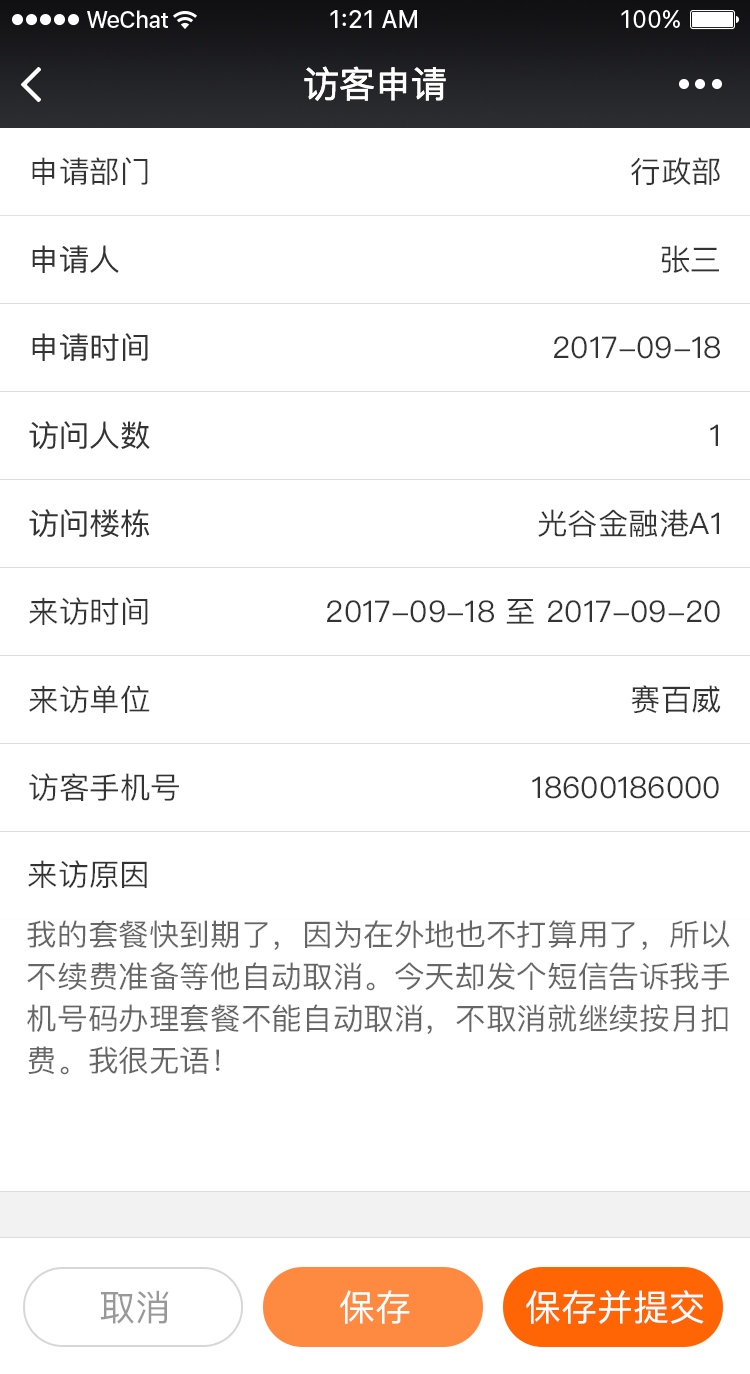
<style>
.page{position:relative;width:750px;height:1374px;background:#ffffff}
.page>*{position:absolute;margin:0}
.t1{font:36px "PingFangSC-Regular";color:#ffffff}
.t2{font:30px "PingFangSC-Regular";color:#333333}
.t3{font:30px "PingFang-SC-Medium";color:#333333}
.t4{font:30px/42px "PingFangSC-Regular";color:#666666}
.t5{font:36px "PingFangSC-Regular";color:#999999}
</style>
<div class="page">
<p class="t1" style="left:304px;top:66px;width:142px;height:35px">访客申请</p>
<p class="t2" style="left:32px;top:157px;width:116px;height:28px">申请部门</p>
<p class="t2" style="left:631px;top:157px;width:89px;height:28px">行政部</p>
<p class="t3" style="left:32px;top:245px;width:87px;height:28px">申请人</p>
<p class="t2" style="left:661px;top:245px;width:58px;height:28px">张三</p>
<p class="t3" style="left:32px;top:333px;width:116px;height:28px">申请时间</p>
<p class="t2" style="left:554px;top:336px;width:166px;height:23px">2017-09-18</p>
<p class="t3" style="left:29px;top:421px;width:121px;height:28px">访问人数</p>
<p class="t2" style="left:710px;top:424px;width:8px;height:22px">1</p>
<p class="t3" style="left:29px;top:509px;width:121px;height:28px">访问楼栋</p>
<p class="t2" style="left:538px;top:509px;width:181px;height:28px">光谷金融港A1</p>
<p class="t2" style="left:29px;top:597px;width:119px;height:28px">来访时间</p>
<p class="t2" style="left:327px;top:599px;width:393px;height:25px">2017-09-18 至 2017-09-20</p>
<p class="t2" style="left:29px;top:685px;width:121px;height:28px">来访单位</p>
<p class="t2" style="left:631px;top:685px;width:90px;height:29px">赛百威</p>
<p class="t2" style="left:29px;top:773px;width:150px;height:28px">访客手机号</p>
<p class="t2" style="left:532px;top:776px;width:187px;height:23px">18600186000</p>
<p class="t2" style="left:28px;top:860px;width:119px;height:28px">来访原因</p>
<p class="t4" style="left:27px;top:920px;width:703px;height:155px">我的套餐快到期了，因为在外地也不打算用了，所以<br>不续费准备等他自动取消。今天却发个短信告诉我手<br>机号码办理套餐不能自动取消，不取消就继续按月扣<br>费。我很无语！</p>
<p class="t5" style="left:100px;top:1290px;width:69px;height:34px">取消</p>
<p class="t1" style="left:340px;top:1290px;width:70px;height:34px">保存</p>
<p class="t1" style="left:526px;top:1290px;width:178px;height:34px">保存并提交</p>
</div>
